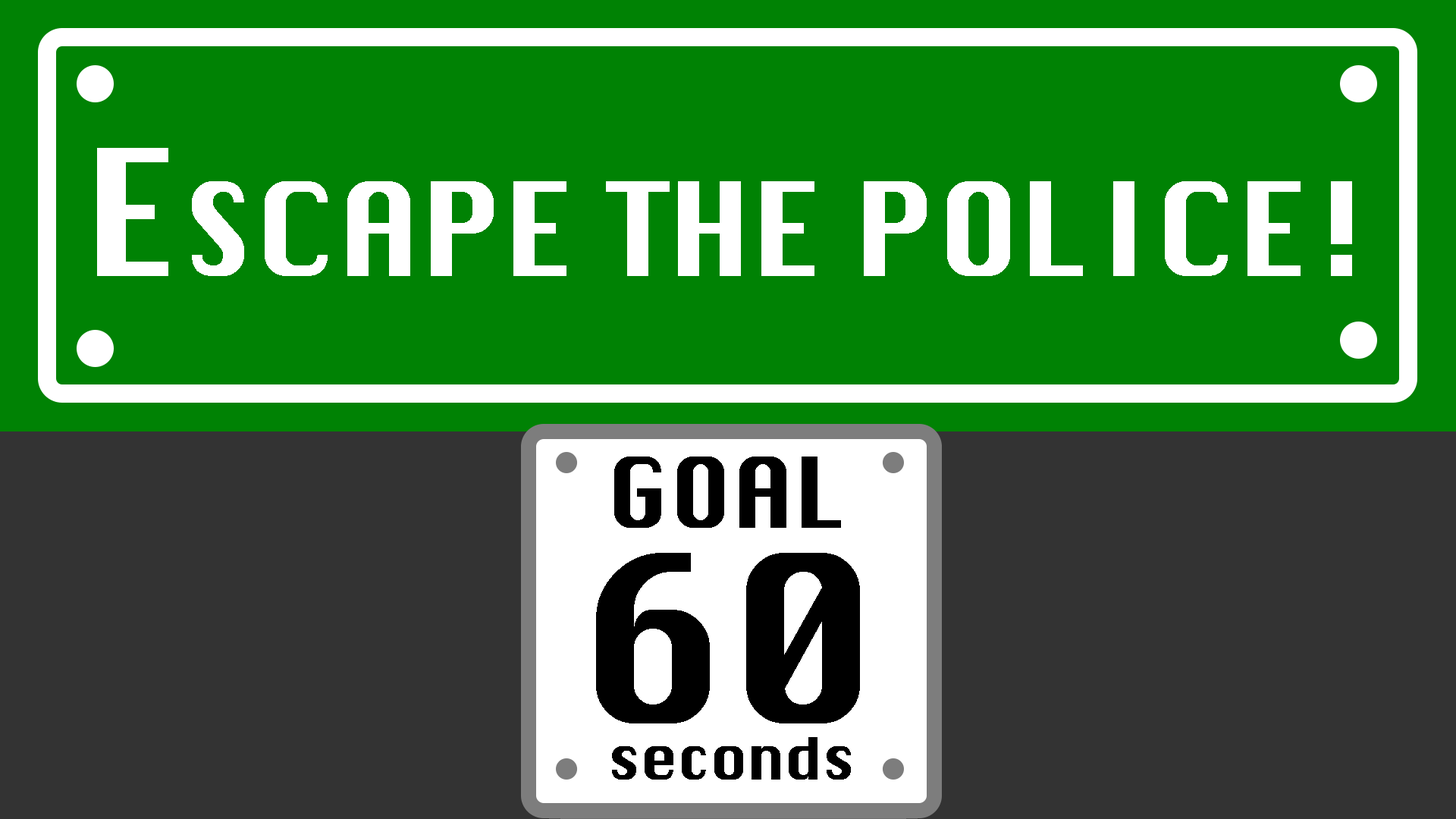
<style>
.page{position:relative;width:1456px;height:819px;background:#008204}
.page>*{position:absolute;margin:0}
.t1{font:126.4px "Silom";letter-spacing:-0.01em;color:#ffffff}
.t2{font:170.6px "Silom";letter-spacing:-0.01em;color:#ffffff}
.t3{font:94.8px "Silom";letter-spacing:-0.01em;color:#000000}
.t4{font:227.5px "Silom";letter-spacing:-0.01em;color:#000000}
.t5{font:56.9px "Silom";letter-spacing:-0.01em;color:#000000}
</style>
<div class="page">
<p class="t1" style="left:97px;top:148px;width:1255px;height:128px"><span class="t2">E</span>SCAPE THE POLICE!</p>
<p class="t3" style="left:614px;top:457px;width:227px;height:71px">GOAL</p>
<p class="t4" style="left:596px;top:553px;width:264px;height:170px">60</p>
<p class="t5" style="left:612px;top:737px;width:239px;height:43px">seconds</p>
</div>
